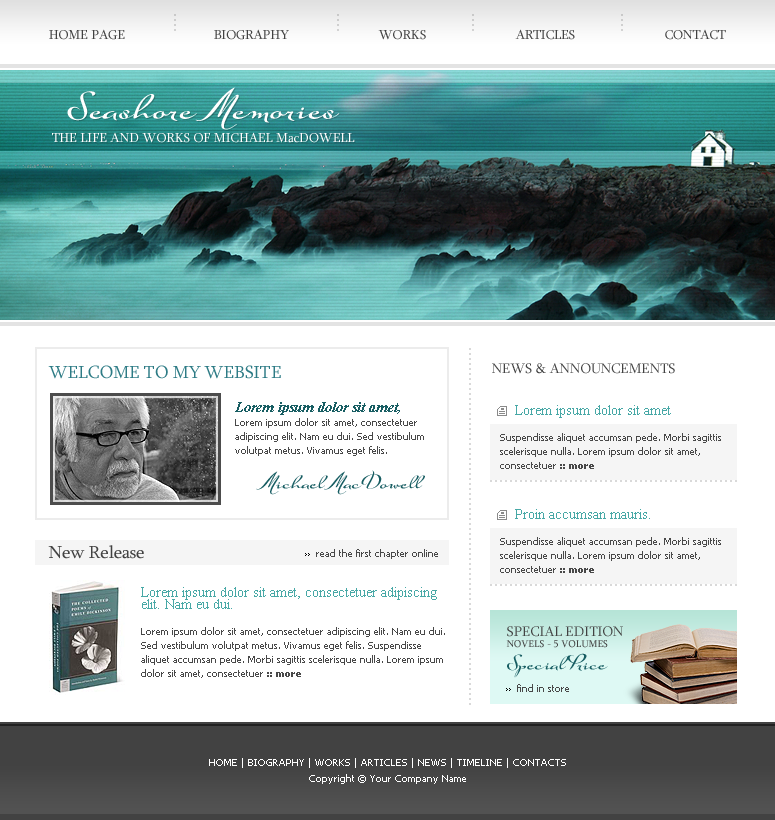
<style>
.page{position:relative;width:775px;height:820px;background:#ffffff}
.page>*{position:absolute;margin:0}
.t1{font:18.8px "Sylfaen";color:#cdcdcd}
.t2{font:13.2px "Sylfaen";color:#414141}
.t3{font:37.2px "SuaveScriptAlt-Bold";color:#ffffff}
.t4{font:13.2px "Sylfaen";color:#ffffff}
.t5{font:18.8px "Sylfaen";color:#d9d9d9}
.t6{font:18px "Sylfaen";color:#2d7b85}
.t7{font:14px "Sylfaen";color:#424242;text-transform:uppercase}
.t8{font:10px/14px "Tahoma";color:#484848}
.t9{font:14px/12px "TimesNewRomanPS-BoldItalicMT";color:#175d62}
.t10{font:14px "TimesNewRomanPSMT";color:#47a8a6}
.t11{font:10px/14px "Tahoma-Bold";color:#484848}
.t12{font:20.2px "SuaveScriptAlt-Bold";color:#175d62}
.t13{font:18px "Sylfaen";color:#424242}
.t14{font:10px "Tahoma";color:#484848}
.t15{font:14px/12px "TimesNewRomanPSMT";color:#47a8a6}
.t16{font:10px "Sylfaen";color:#424242;text-transform:uppercase}
.t17{font:10px/16px "Tahoma";color:#ffffff}
</style>
<div class="page">
<p class="t1" style="left:174px;top:14px;width:2px;height:17px;rotate:90deg">....</p>
<p class="t1" style="left:337px;top:14px;width:2px;height:17px;rotate:90deg">....</p>
<p class="t1" style="left:472px;top:14px;width:2px;height:17px;rotate:90deg">....</p>
<p class="t1" style="left:621px;top:14px;width:2px;height:17px;rotate:90deg">....</p>
<p class="t2" style="left:49px;top:29px;width:76px;height:11px">HOME PAGE</p>
<p class="t2" style="left:214px;top:29px;width:75px;height:11px">BIOGRAPHY</p>
<p class="t2" style="left:378px;top:30px;width:48px;height:10px">WORKS</p>
<p class="t2" style="left:515px;top:29px;width:60px;height:11px">ARTICLES</p>
<p class="t2" style="left:665px;top:29px;width:61px;height:11px">CONTACT</p>
<p class="t3" style="left:67px;top:87px;width:273px;height:43px">Seashore Memories</p>
<p class="t4" style="left:52px;top:132px;width:303px;height:11px">THE LIFE AND WORKS OF MICHAEL MacDOWELL</p>
<p class="t5" style="left:469px;top:348px;width:2px;height:357px;rotate:90deg">........................................................................</p>
<p class="t6" style="left:48px;top:365px;width:233px;height:14px">WELCOME TO MY WEBSITE</p>
<p class="t7" style="left:492px;top:363px;width:183px;height:11px">News &amp; Announcements</p>
<p class="t8" style="left:235px;top:402px;width:189px;height:54px"><span class="t9">Lorem ipsum dolor sit amet, <br></span>Lorem ipsum dolor sit amet, consectetuer adipiscing elit. Nam eu dui. Sed vestibulum volutpat metus. Vivamus eget felis.</p>
<p class="t10" style="left:515px;top:405px;width:156px;height:13px">Lorem ipsum dolor sit amet</p>
<p class="t8" style="left:500px;top:433px;width:221px;height:36px">Suspendisse aliquet accumsan pede. Morbi sagittis scelerisque nulla. Lorem ipsum dolor sit amet, consectetuer <span class="t11">:: more</span></p>
<p class="t12" style="left:256px;top:470px;width:169px;height:25px">Michael MacDowell</p>
<p class="t5" style="left:490px;top:480px;width:247px;height:2px">..................................................</p>
<p class="t10" style="left:515px;top:509px;width:135px;height:10px">Proin accumsan mauris.</p>
<p class="t13" style="left:48px;top:545px;width:96px;height:14px">New Release</p>
<p class="t8" style="left:500px;top:537px;width:221px;height:36px">Suspendisse aliquet accumsan pede. Morbi sagittis scelerisque nulla. Lorem ipsum dolor sit amet, consectetuer <span class="t11">:: more</span></p>
<p class="t14" style="left:316px;top:549px;width:122px;height:10px">read the first chapter online</p>
<p class="t8" style="left:141px;top:587px;width:304px;height:91px"><span class="t15">Lorem ipsum dolor sit amet, consectetuer adipiscing elit. Nam eu dui. <br><br></span>Lorem ipsum dolor sit amet, consectetuer adipiscing elit. Nam eu dui. Sed vestibulum volutpat metus. Vivamus eget felis. Suspendisse aliquet accumsan pede. Morbi sagittis scelerisque nulla. Lorem ipsum dolor sit amet, consectetuer<span class="t11"> :: more</span></p>
<p class="t5" style="left:490px;top:584px;width:247px;height:2px">..................................................</p>
<p class="t7" style="left:507px;top:626px;width:116px;height:11px">SPECIAL EDITION</p>
<p class="t16" style="left:506px;top:640px;width:102px;height:8px">novels - 5 volumes</p>
<p class="t12" style="left:507px;top:653px;width:101px;height:25px">Special Price</p>
<p class="t14" style="left:517px;top:684px;width:52px;height:8px">find in store</p>
<p class="t17" style="left:209px;top:758px;width:357px;height:26px;text-align:center">HOME | BIOGRAPHY | WORKS | ARTICLES | NEWS | TIMELINE | CONTACTS<br>Copyright © Your Company Name</p>
</div>
